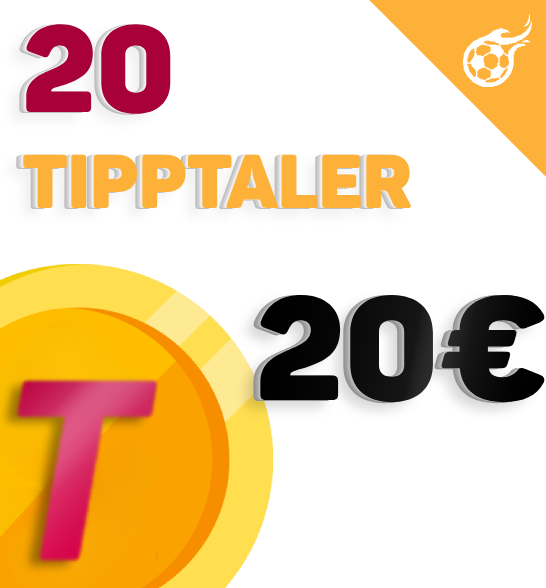
<style>
.page{position:relative;width:546px;height:588px;background:#ffffff}
.page>*{position:absolute;margin:0}
.t1{font:75px "Panton-BlackCaps";color:#feb139}
.t2{font:121px "Panton-BlackCaps";color:#a80038}
.t3{font:145px "Panton-BlackCaps";color:#000000}
</style>
<div class="page">
<p class="t1" style="left:23px;top:24px;width:389px;height:184px"><span class="t2">20 <br></span>TippTaler</p>
<p class="t3" style="left:259px;top:294px;width:287px;height:109px">20€</p>
</div>
